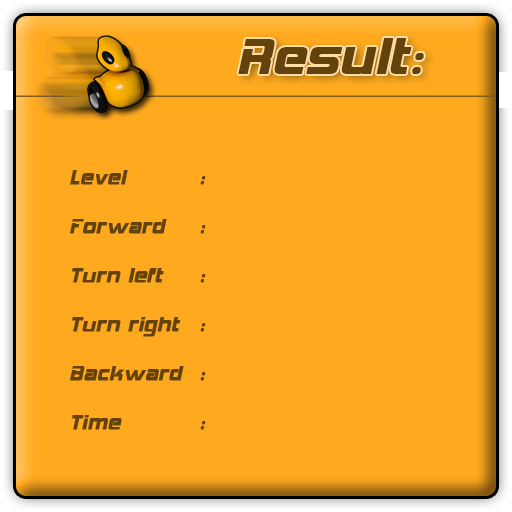
<style>
.page{position:relative;width:512px;height:512px;background:#ffaa1e}
.page>*{position:absolute;margin:0}
.t1{font:60px "HemiHead426";color:#63420c;font-weight:bold}
.t2{font:24px/49px "HemiHead426";color:#63420c;font-weight:bold}
</style>
<div class="page">
<p class="t1" style="left:238px;top:38px;width:186px;height:36px">Result:</p>
<p class="t2" style="left:70px;top:170px;width:114px;height:260px">Level<br>Forward<br>Turn left<br>Turn right<br>Backward<br>Time</p>
<p class="t2" style="left:200px;top:176px;width:6px;height:254px">:<br>:<br>:<br>:<br>:<br>:</p>
</div>
